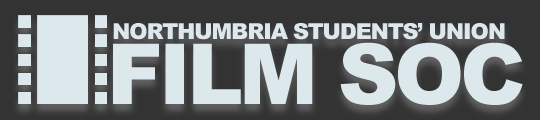
<style>
.page{position:relative;width:540px;height:120px;background:#dce8eb}
.page>*{position:absolute;margin:0}
.t1{font:22px "Arial-Black";letter-spacing:-0.05em;color:#dce8eb}
.t2{font:84px "Arial-Black";letter-spacing:-0.05em;color:#dce8eb}
</style>
<div class="page">
<p class="t1" style="left:113px;top:23px;width:392px;height:17px">NORTHUMBRIA STUDENTS’ UNION</p>
<p class="t2" style="left:113px;top:42px;width:410px;height:63px">FILM SOC</p>
</div>
